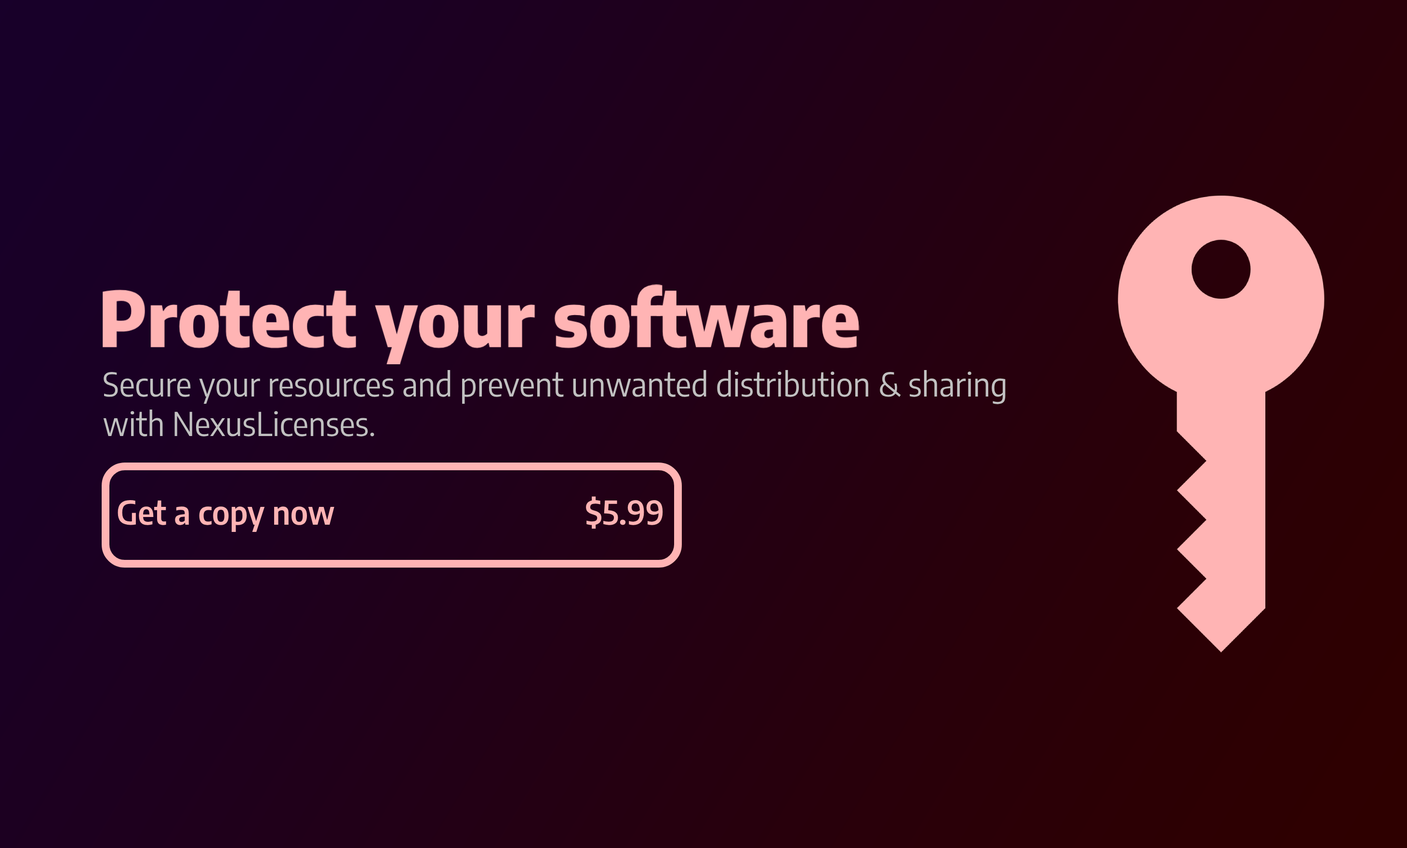
<style>
.page{position:relative;width:1407px;height:848px}
.page>*{position:absolute;margin:0}
.t1{font:32.8px "EncodeSansSemiCondensed-Regular";color:#c1c1c1}
.t2{font:32.8px "EncodeSansSemiCondensed-SemiBold";color:#ffb4b4}
</style>
<div class="page">
<p class="t1" style="left:103px;top:370px;width:902px;height:66px">Secure your resources and prevent unwanted distribution &amp; sharing<br>with NexusLicenses.</p>
<p class="t2" style="left:118px;top:496px;width:545px;height:36px">Get a copy now                                 $5.99</p>
</div>
